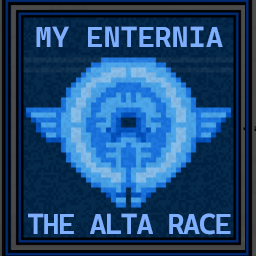
<style>
.page{position:relative;width:256px;height:256px}
.page>*{position:absolute;margin:0}
.t1{font:29.2px "CascadiaMonoRoman-Bold";color:#7eafff}
.t2{font:29.2px "CascadiaCodeRoman-Bold";letter-spacing:-0.05em;color:#7eafff}
</style>
<div class="page">
<p class="t1" style="left:36px;top:26px;width:187px;height:21px">MY ENTERNIA</p>
<p class="t2" style="left:28px;top:213px;width:203px;height:22px">THE ALTA RACE</p>
</div>
